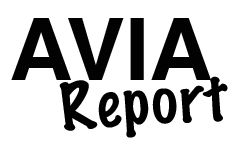
<style>
.page{position:relative;width:237px;height:148px;background:#ffffff}
.page>*{position:absolute;margin:0}
.t1{font:86.8px "Helvetica-Bold";color:#020202}
.t2{font:60px "MarkerFelt-Thin";color:#000000}
</style>
<div class="page">
<p class="t1" style="left:11px;top:18px;width:200px;height:62px">AVIA</p>
<p class="t2" style="left:59px;top:76px;width:169px;height:62px;rotate:-4deg">Report</p>
</div>
